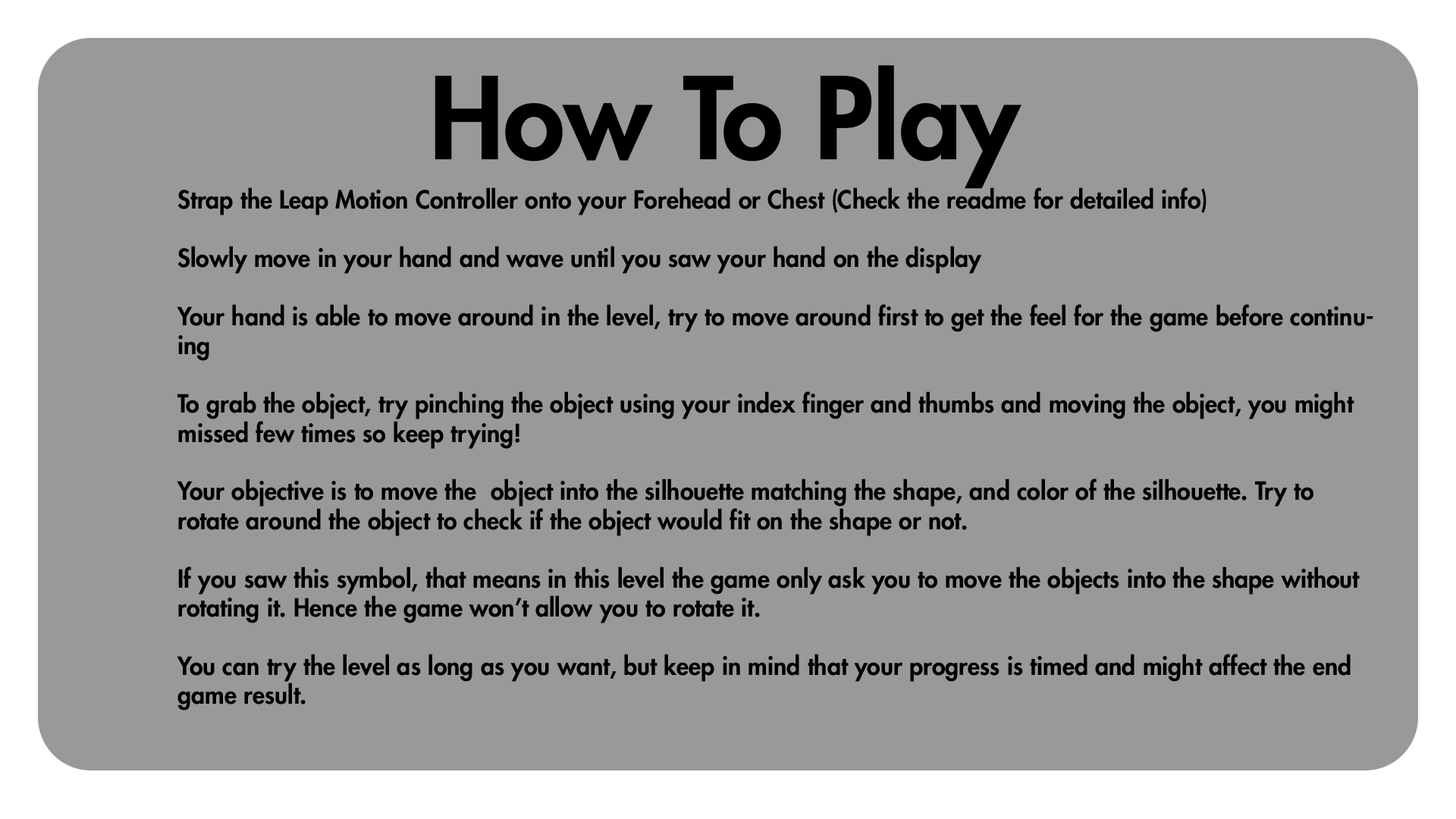
<style>
.page{position:relative;width:1456px;height:819px;background:#999999}
.page>*{position:absolute;margin:0}
.t1{font:110.7px "FuturaLT-Heavy";color:#000000}
.t2{font:24.3px "FuturaLT-Heavy";color:#000000}
</style>
<div class="page">
<p class="t1" style="left:435px;top:65px;width:586px;height:124px">How To Play</p>
<p class="t2" style="left:177px;top:187px;width:1196px;height:524px">Strap the Leap Motion Controller onto your Forehead or Chest (Check the readme for detailed info)<br><br>Slowly move in your hand and wave until you saw your hand on the display<br><br>Your hand is able to move around in the level, try to move around first to get the feel for the game before continuing<br><br>To grab the object, try pinching the object using your index finger and thumbs and moving the object, you might missed few times so keep trying!<br><br>Your objective is to move the  object into the silhouette matching the shape, and color of the silhouette. Try to rotate around the object to check if the object would fit on the shape or not.<br><br>If you saw this symbol, that means in this level the game only ask you to move the objects into the shape without rotating it. Hence the game won’t allow you to rotate it.<br><br>You can try the level as long as you want, but keep in mind that your progress is timed and might affect the end game result.<br><br>Have fun!</p>
</div>
